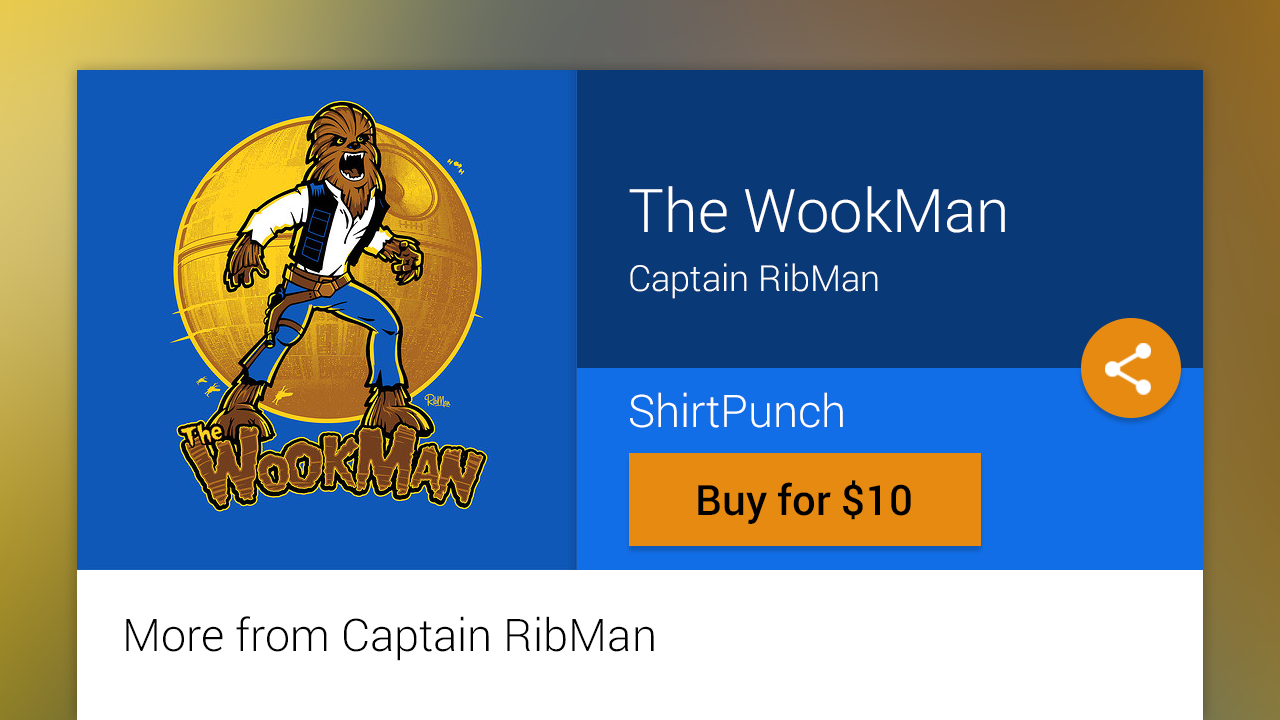
<style>
.page{position:relative;width:1280px;height:720px}
.page>*{position:absolute;margin:0}
.t1{font:60px "Roboto-Light";color:#ffffff}
.t2{font:36px "Roboto-Light";color:#ffffff}
.t3{font:45px "Roboto-Light";color:#ffffff}
.t4{font:42px "Roboto-Medium";color:#000000}
.t5{font:45px "Roboto-Light";color:#000000}
</style>
<div class="page">
<p class="t1" style="left:629px;top:186px;width:376px;height:47px">The WookMan</p>
<p class="t2" style="left:630px;top:263px;width:248px;height:36px">Captain RibMan</p>
<p class="t3" style="left:630px;top:392px;width:213px;height:36px">ShirtPunch</p>
<p class="t4" style="left:698px;top:480px;width:213px;height:44px">Buy for $10</p>
<p class="t5" style="left:126px;top:616px;width:528px;height:45px">More from Captain RibMan</p>
</div>
